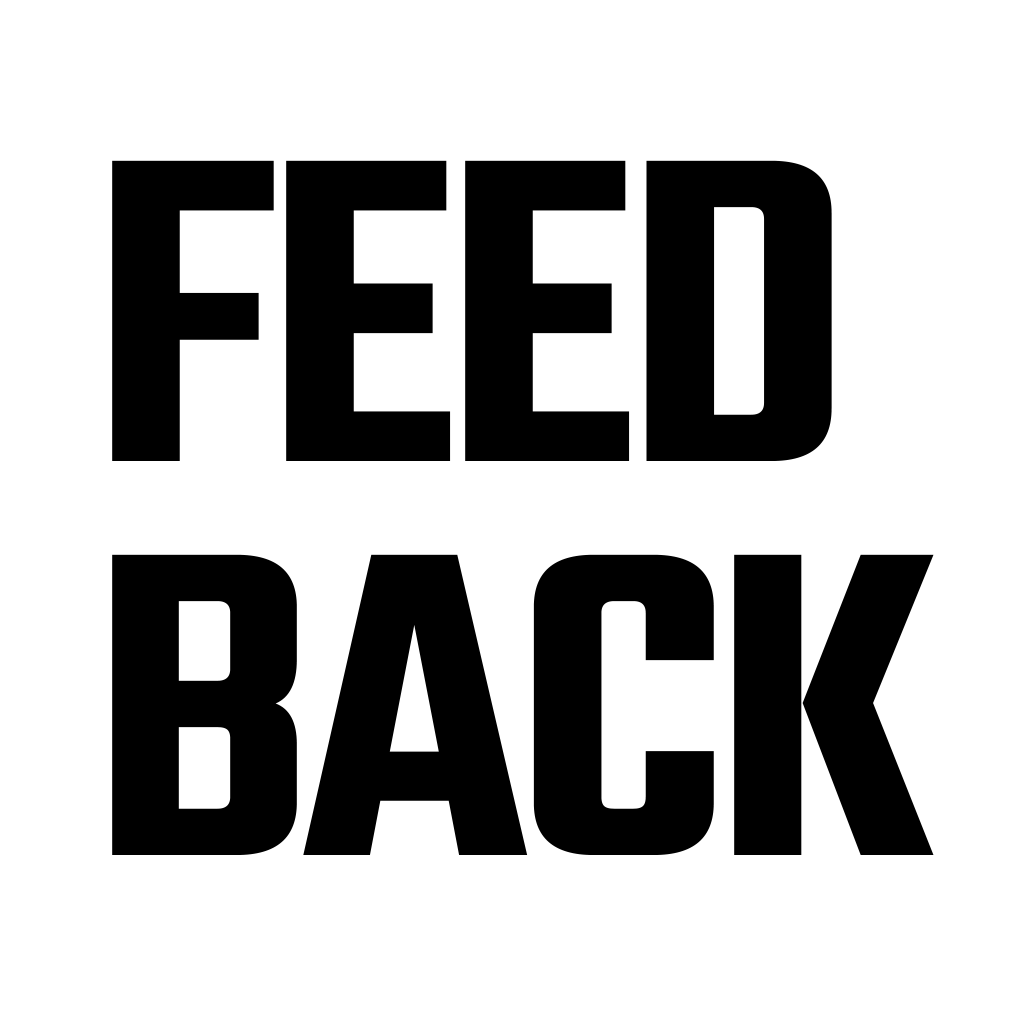
<style>
.page{position:relative;width:1024px;height:1024px;background:#ffffff}
.page>*{position:absolute;margin:0}
.t1{font:471.8px/394.3px "Teko-SemiBold";letter-spacing:-0.03em;color:#000000;text-transform:uppercase}
</style>
<div class="page">
<p class="t1" style="left:112px;top:160px;width:822px;height:695px">Feed<br>back</p>
</div>
